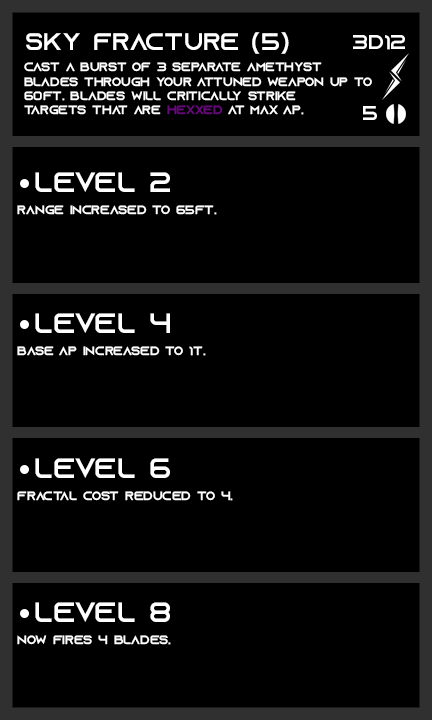
<style>
.page{position:relative;width:432px;height:720px;background:#000000}
.page>*{position:absolute;margin:0}
.t1{font:24px "AzonixRegular";color:#ffffff}
.t2{font:20px "AzonixRegular";color:#ffffff}
.t3{font:12px "AzonixRegular";color:#ffffff}
.t4{font:12px "AzonixRegular";color:#67087b}
.t5{font:28px "AzonixRegular";color:#ffffff}
</style>
<div class="page">
<p class="t1" style="left:26px;top:32px;width:263px;height:22px">sky fracture (5)</p>
<p class="t2" style="left:353px;top:35px;width:52px;height:15px">3d12</p>
<p class="t3" style="left:24px;top:62px;width:348px;height:53px">cast a burst of 3 separate amethyst <br>blades through your attuned weapon up to<br>60ft. blades will critically strike <br>targets that are <span class="t4">hexxed</span> at max ap.</p>
<p class="t2" style="left:363px;top:106px;width:14px;height:14px">5</p>
<p class="t5" style="left:35px;top:172px;width:135px;height:20px">level 2</p>
<p class="t3" style="left:17px;top:205px;width:200px;height:10px">range increased to 65ft.</p>
<p class="t5" style="left:35px;top:313px;width:135px;height:20px">level 4</p>
<p class="t3" style="left:17px;top:346px;width:189px;height:10px">base ap increased to 1t.</p>
<p class="t5" style="left:35px;top:458px;width:135px;height:20px">level 6</p>
<p class="t3" style="left:17px;top:491px;width:216px;height:10px">fractal cost reduced to 4.</p>
<p class="t5" style="left:35px;top:602px;width:135px;height:20px">level 8</p>
<p class="t3" style="left:17px;top:635px;width:154px;height:10px">now fires 4 blades.</p>
</div>
